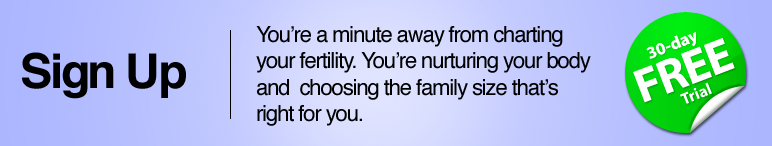
<style>
.page{position:relative;width:772px;height:146px}
.page>*{position:absolute;margin:0}
.t1{font:22px "Helvetica";letter-spacing:-0.05em;color:#000000}
.t2{font:48px "MyriadPro-Bold";letter-spacing:-0.025em;color:#ffffff}
.t3{font:17.2px "MyriadPro-Bold";color:#ffffff}
.t4{font:48px "Helvetica-Bold";letter-spacing:-0.05em;color:#000000}
.t5{font:16.2px "MyriadPro-Bold";color:#ffffff}
</style>
<div class="page">
<p class="t1" style="left:256px;top:26px;width:335px;height:100px">You’re a minute away from charting <br>your fertility. You’re nurturing your body<br>and  choosing the family size that’s <br>right for you.</p>
<p class="t2" style="left:633px;top:38px;width:102px;height:65px;rotate:-21deg">FREE</p>
<p class="t3" style="left:646px;top:32px;width:50px;height:27px;rotate:-21deg">30-day</p>
<p class="t4" style="left:22px;top:52px;width:164px;height:47px">Sign Up</p>
<p class="t5" style="left:680px;top:82px;width:32px;height:22px;rotate:-22deg">Trial</p>
</div>
